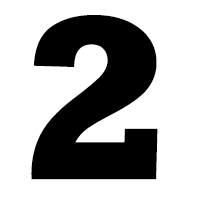
<style>
.page{position:relative;width:200px;height:200px;background:#ffffff}
.page>*{position:absolute;margin:0}
.t1{font:236.9px "Rockwell-ExtraBold";color:#000000}
</style>
<div class="page">
<p class="t1" style="left:31px;top:15px;width:127px;height:165px">2</p>
</div>
